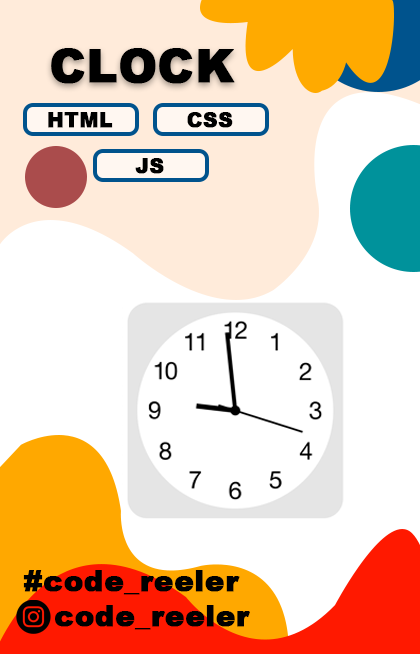
<style>
.page{position:relative;width:420px;height:654px;background:#ffffff}
.page>*{position:absolute;margin:0}
.t1{font:79.2px "Arial-Black";color:#000000;font-weight:bold}
.t2{font:34.7px "Arial-Black";color:#000000;font-weight:bold}
.t3{font:50px "Arial-Black";color:#000000;font-weight:bold}
</style>
<div class="page">
<p class="t1" style="left:51px;top:48px;width:184px;height:36px">CLOCK</p>
<p class="t2" style="left:48px;top:112px;width:65px;height:16px">HTML</p>
<p class="t2" style="left:187px;top:112px;width:46px;height:16px">CSS</p>
<p class="t2" style="left:135px;top:158px;width:29px;height:16px">JS</p>
<p class="t3" style="left:23px;top:570px;width:217px;height:25px">#code_reeler</p>
<p class="t3" style="left:55px;top:605px;width:195px;height:25px">code_reeler</p>
</div>
